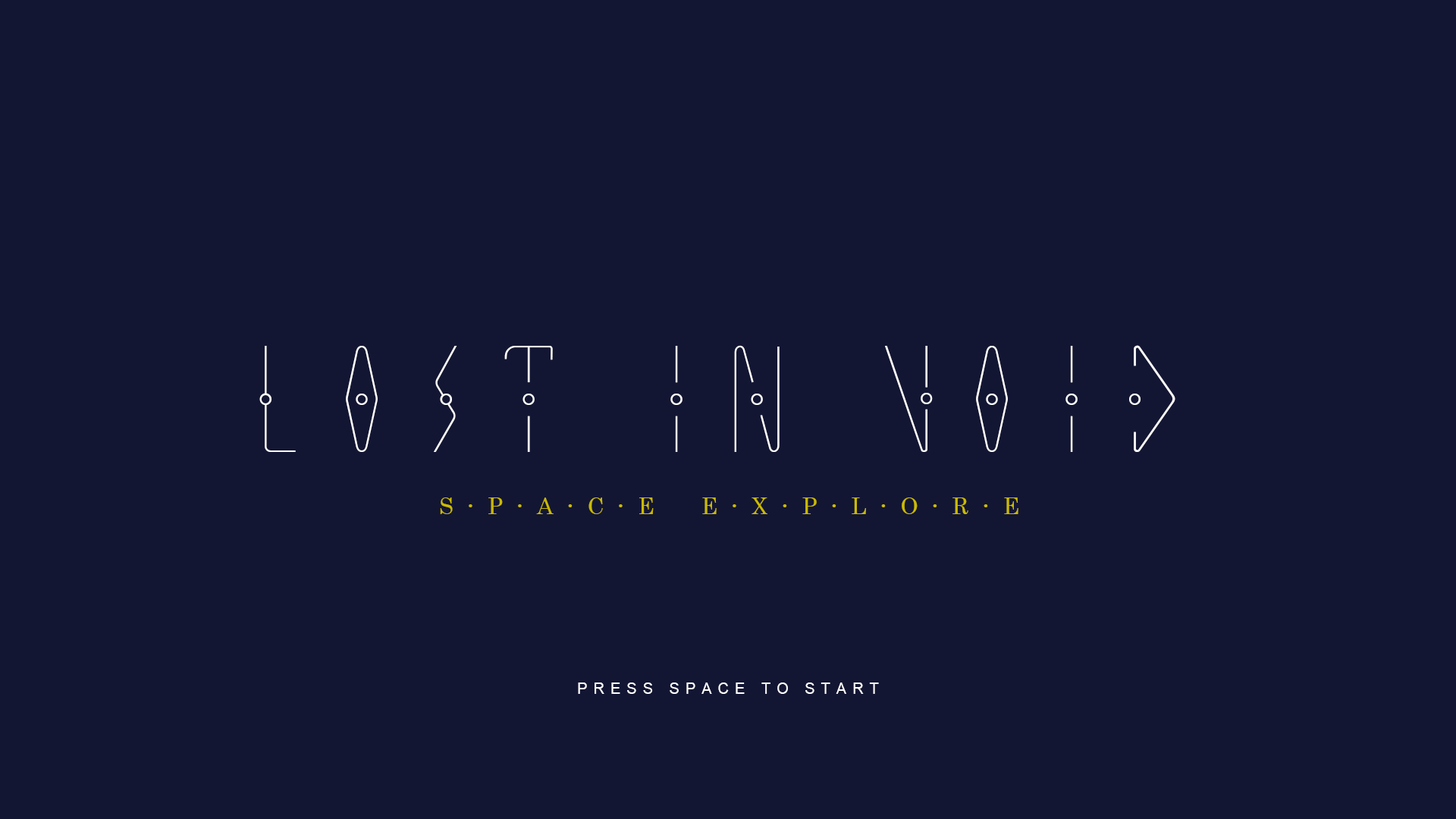
<style>
.page{position:relative;width:1456px;height:819px;background:#131633}
.page>*{position:absolute;margin:0}
.t1{font:151.7px "INTERNORSE-Regular";letter-spacing:0.2em;color:#ffffff}
.t2{font:22.7px "Century";letter-spacing:0.5em;color:#cbba01}
.t3{font:22.7px "MeiryoUI";letter-spacing:0.5em;color:#cbba01}
.t4{font:15.2px "ArialMT";letter-spacing:0.4em;color:#ffffff}
</style>
<div class="page">
<p class="t1" style="left:259px;top:345px;width:916px;height:107px">LOST IN VOID</p>
<p class="t2" style="left:440px;top:497px;width:578px;height:17px">S<span class="t3">･</span>P<span class="t3">･</span>A<span class="t3">･</span>C<span class="t3">･</span>E  E<span class="t3">･</span>X<span class="t3">･</span>P<span class="t3">･</span>L<span class="t3">･</span>O<span class="t3">･</span>R<span class="t3">･</span>E</p>
<p class="t4" style="left:578px;top:682px;width:301px;height:12px">PRESS SPACE TO START</p>
</div>
